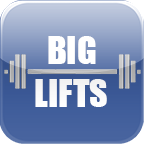
<style>
.page{position:relative;width:144px;height:144px}
.page>*{position:absolute;margin:0}
.t1{font:36px "Impact";color:#ffffff}
</style>
<div class="page">
<p class="t1" style="left:48px;top:36px;width:48px;height:28px">BIG</p>
<p class="t1" style="left:35px;top:79px;width:72px;height:28px">LIFTS</p>
</div>
